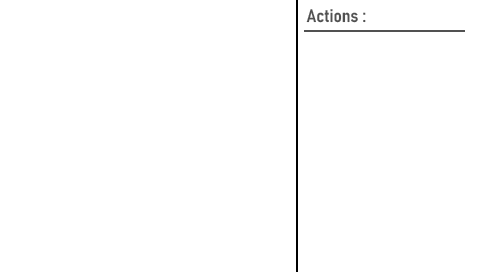
<style>
.page{position:relative;width:480px;height:272px;background:#ffffff}
.page>*{position:absolute;margin:0}
.t1{font:18px "Bahnschrift-SemiBoldSemiCondensed";color:#515151}
</style>
<div class="page">
<p class="t1" style="left:306px;top:9px;width:60px;height:14px">Actions :</p>
</div>
